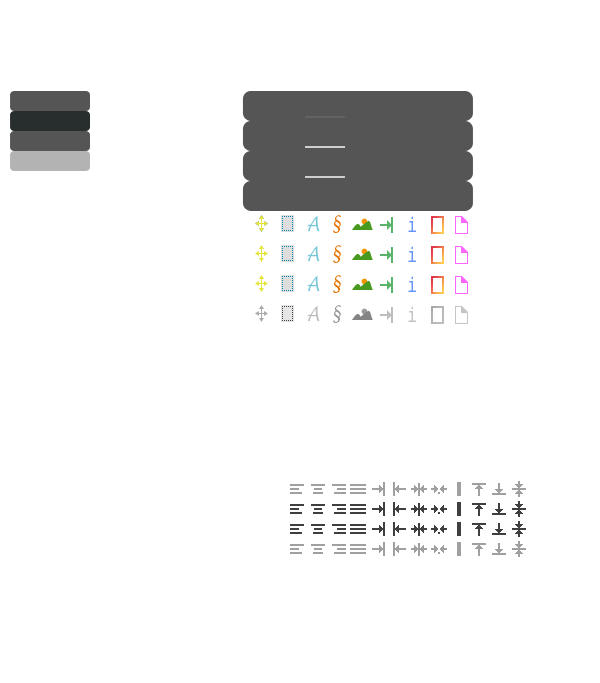
<style>
.page{position:relative;width:600px;height:683px;background:#ffffff}
.page>*{position:absolute;margin:0}
.t1{font:20px "LucidaHandwriting-Italic";color:#76c7d8;scale:0.84 1}
.t2{font:20px "LucidaHandwriting-Italic";color:#e67300;scale:0.84 1}
.t3{font:20px "Menlo-Regular";color:#6495fa;scale:0.84 1}
.t4{font:20px "LucidaHandwriting-Italic";color:#959595;scale:0.84 1}
.t5{font:20px "LucidaHandwriting-Italic";color:#bdbdbd;scale:0.84 1}
.t6{font:20px "Menlo-Regular";color:#c2c2c2;scale:0.84 1}
</style>
<div class="page">
<p class="t1" style="left:307px;top:216px;width:13px;height:16px">A</p>
<p class="t2" style="left:333px;top:215px;width:8px;height:18px">§</p>
<p class="t3" style="left:408px;top:216px;width:8px;height:16px">i</p>
<p class="t1" style="left:307px;top:246px;width:13px;height:16px">A</p>
<p class="t2" style="left:333px;top:245px;width:8px;height:18px">§</p>
<p class="t3" style="left:408px;top:246px;width:8px;height:16px">i</p>
<p class="t1" style="left:307px;top:276px;width:13px;height:16px">A</p>
<p class="t2" style="left:333px;top:275px;width:8px;height:18px">§</p>
<p class="t3" style="left:408px;top:276px;width:8px;height:16px">i</p>
<p class="t4" style="left:333px;top:305px;width:8px;height:18px">§</p>
<p class="t5" style="left:307px;top:306px;width:13px;height:16px">A</p>
<p class="t6" style="left:408px;top:306px;width:8px;height:16px">i</p>
</div>
